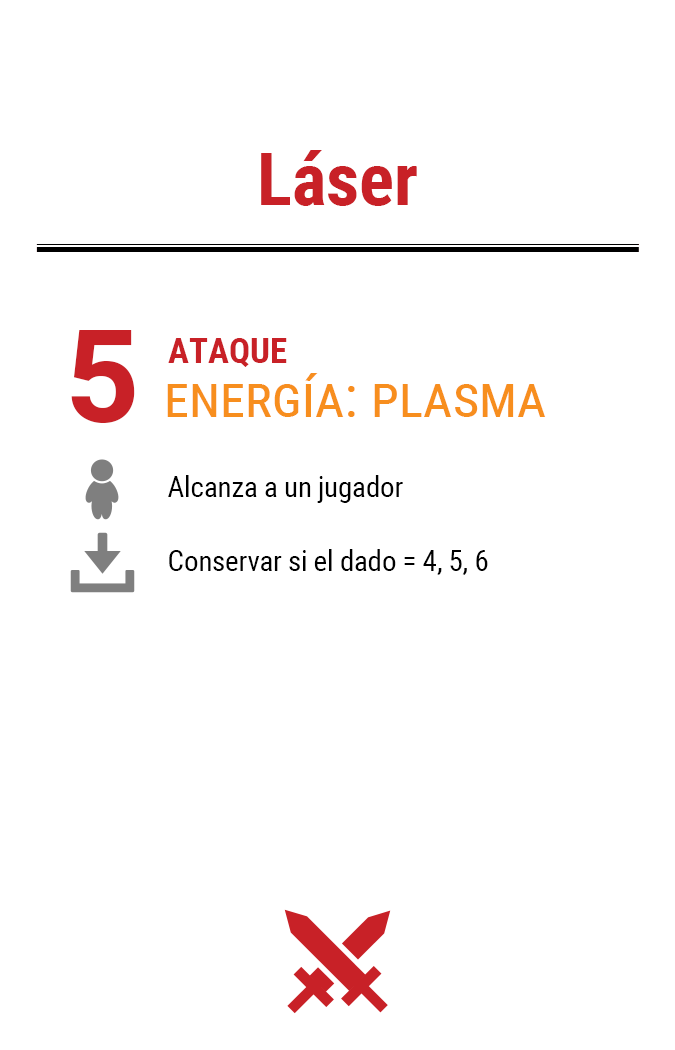
<style>
.page{position:relative;width:675px;height:1050px;background:#ffffff}
.page>*{position:absolute;margin:0}
.t1{font:72.9px "RobotoCondensed-Bold";color:#c82127}
.t2{font:130px "Roboto-Bold";letter-spacing:-0.06em;color:#c82127}
.t3{font:35px "RobotoCondensed-Bold";color:#c82127}
.t4{font:58.3px "RobotoCondensed-Regular";color:#f78e1e;font-variant:small-caps}
.t5{font:29.2px "RobotoCondensed-Regular";letter-spacing:-0.01em;color:#000000}
</style>
<div class="page">
<p class="t1" style="left:261px;top:150px;width:156px;height:56px">Láser</p>
<p class="t2" style="left:71px;top:330px;width:64px;height:93px">5</p>
<p class="t3" style="left:168px;top:338px;width:119px;height:29px">ATAQUE</p>
<p class="t4" style="left:167px;top:373px;width:379px;height:44px">energía: plasma</p>
<p class="t5" style="left:168px;top:475px;width:235px;height:28px">Alcanza a un jugador</p>
<p class="t5" style="left:169px;top:549px;width:319px;height:26px">Conservar si el dado = 4, 5, 6</p>
</div>
